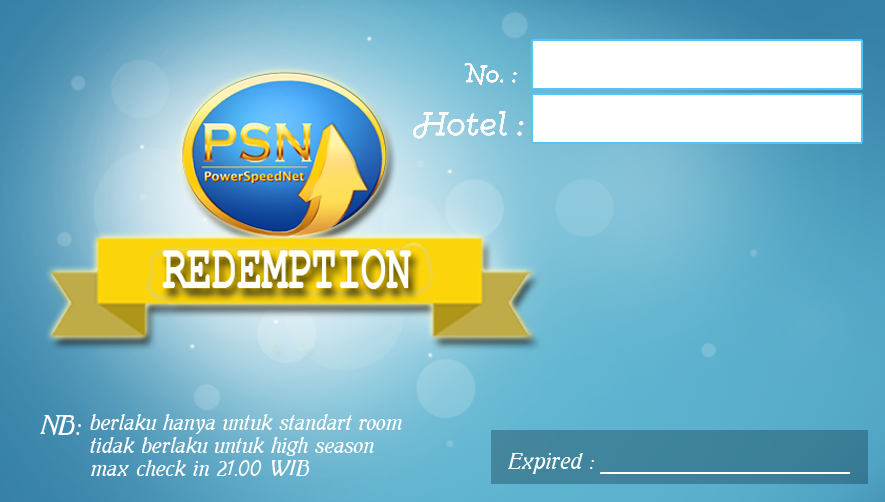
<style>
.page{position:relative;width:885px;height:502px}
.page>*{position:absolute;margin:0}
.t1{font:20.8px "GistLight";letter-spacing:0.025em;color:#fbfafa}
.t2{font:29.2px "GistLight";letter-spacing:0.025em;color:#fcfaf9}
.t3{font:20.8px/22.9px "MutterKrause";letter-spacing:0.025em;color:#fffefe}
.t4{font:26.6px "MutterKrause";letter-spacing:0.025em;color:#fefcfc}
.t5{font:21.6px "MutterKrause";letter-spacing:0.025em;color:#fdfbfb}
</style>
<div class="page">
<p class="t1" style="left:464px;top:63px;width:53px;height:22px">No. :</p>
<p class="t2" style="left:413px;top:111px;width:111px;height:28px">Hotel :</p>
<p class="t3" style="left:90px;top:414px;width:312px;height:62px">berlaku hanya untuk standart room<br>tidak berlaku untuk high season<br>max check in 21.00 WIB</p>
<p class="t4" style="left:40px;top:415px;width:41px;height:20px">NB:</p>
<p class="t5" style="left:508px;top:453px;width:343px;height:21px">Expired : _________________________</p>
</div>
